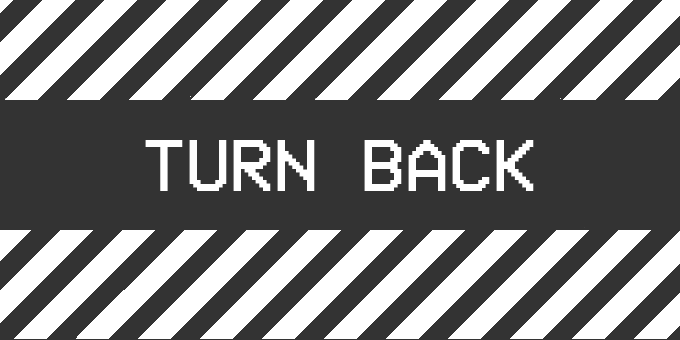
<style>
.page{position:relative;width:680px;height:340px;background:#333333}
.page>*{position:absolute;margin:0}
.t1{font:74.8px "VCROSDMono";color:#ffffff}
</style>
<div class="page">
<p class="t1" style="left:145px;top:140px;width:389px;height:51px">TURN BACK</p>
</div>
